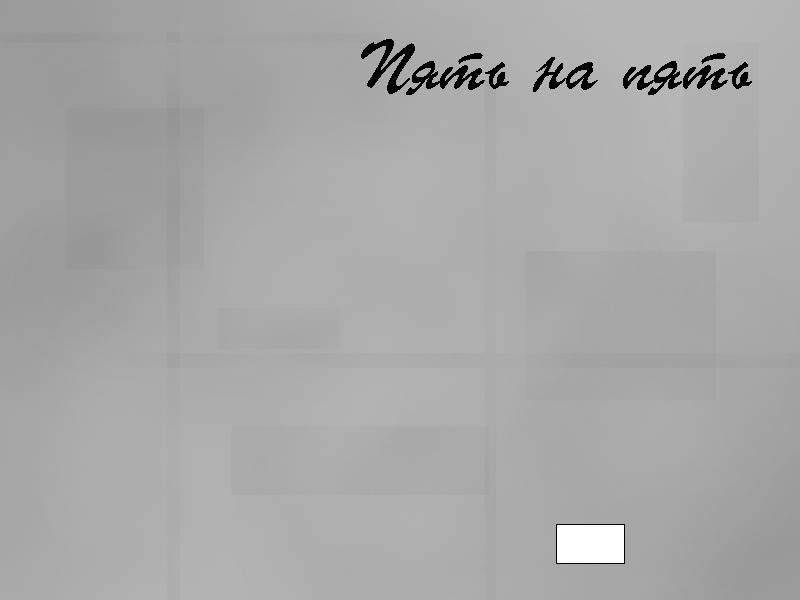
<style>
.page{position:relative;width:800px;height:600px}
.page>*{position:absolute;margin:0}
.t1{font:69.3px "ParsekCTT";color:#000000}
</style>
<div class="page">
<p class="t1" style="left:361px;top:39px;width:391px;height:56px">Пять на пять</p>
</div>
